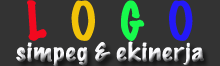
<style>
.page{position:relative;width:220px;height:66px;background:#333333}
.page>*{position:absolute;margin:0}
.t1{font:48px "MarkerFelt-Thin";color:#f2091f}
.t2{font:48px "MarkerFelt-Thin";color:#f2c309}
.t3{font:48px "MarkerFelt-Thin";color:#17fa4c}
.t4{font:48px "MarkerFelt-Thin";color:#2419f8}
.t5{font:23.9px "MarkerFelt-Thin";scale:1.11 1}
</style>
<div class="page">
<p class="t1" style="left:27px;top:0px;width:166px;height:41px">L<span class="t2">  O  </span><span class="t3">G  </span><span class="t4">O</span></p>
<p class="t5" style="left:16px;top:41px;width:188px;height:26px">simpeg &amp; ekinerja</p>
</div>
